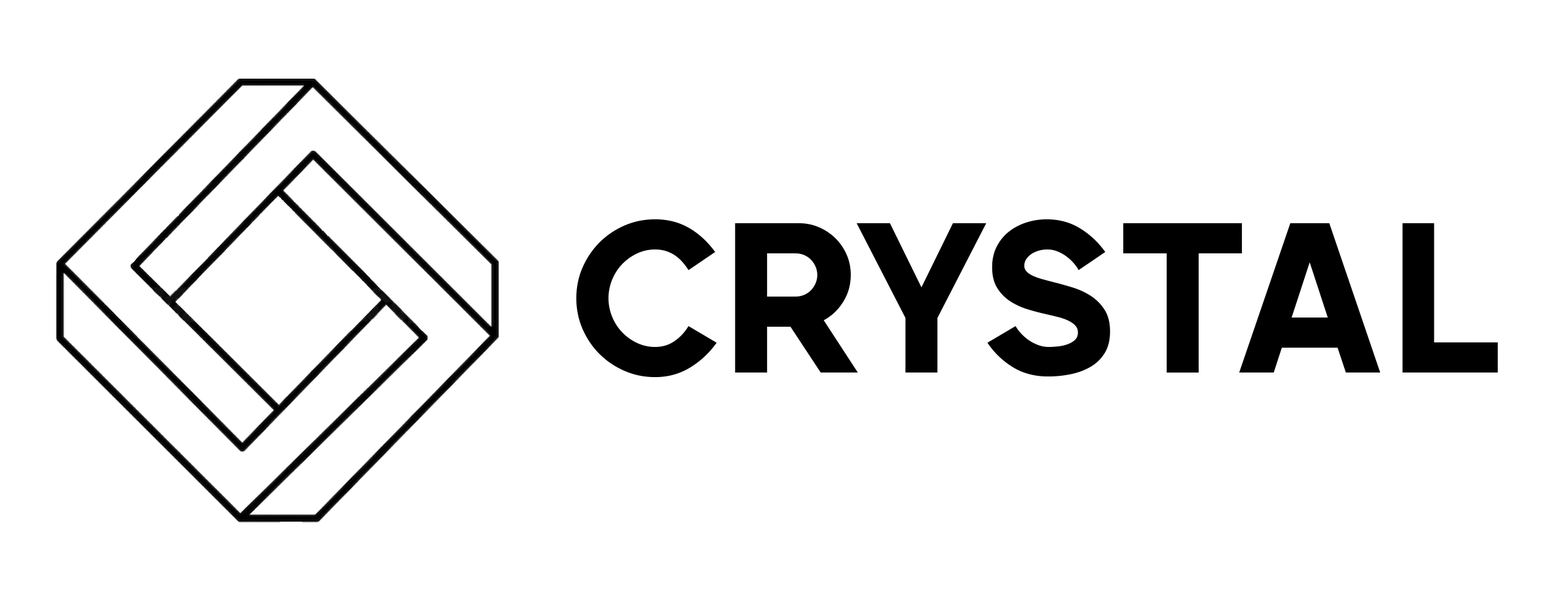
<style>
.page{position:relative;width:1568px;height:601px;background:#ffffff}
.page>*{position:absolute;margin:0}
.t1{font:212.9px "Retroica";color:#000000}
</style>
<div class="page">
<p class="t1" style="left:576px;top:219px;width:922px;height:158px">CRYSTAL</p>
</div>
